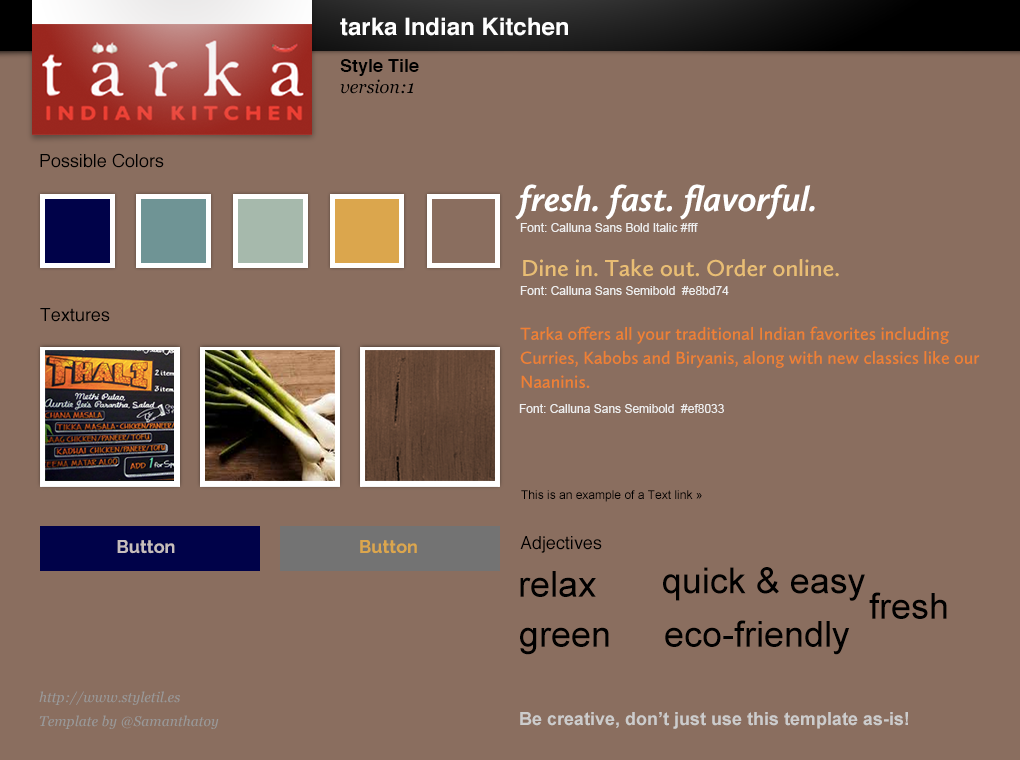
<style>
.page{position:relative;width:1020px;height:760px;background:#8a6e5f}
.page>*{position:absolute;margin:0}
.t1{font:24px "Helvetica-Bold";color:#ffffff}
.t2{font:18px "Helvetica-Bold";color:#000000}
.t3{font:18px "Georgia-Italic";color:#000000}
.t4{font:18px "Helvetica";color:#000000}
.t5{font:36px "CallunaSans-BoldItalic";color:#ffffff}
.t6{font:12px "ArialMT";color:#eeeeee}
.t7{font:24px "CallunaSans-Semibold";color:#e8bd74}
.t8{font:18px/24px "CallunaSans-Semibold";color:#ef8034}
.t9{font:12px "ArialMT";color:#000000}
.t10{font:18px "Raleway-Bold";color:#c6bdbd}
.t11{font:18px "Raleway-Bold";color:#dba64d}
.t12{font:36px "ArialMT";color:#000000}
.t13{font:14px/24px "Georgia-Italic";color:#999999}
.t14{font:18px "Arial-BoldMT";color:#cccccc}
</style>
<div class="page">
<p class="t1" style="left:340px;top:17px;width:228px;height:19px">tarka Indian Kitchen</p>
<p class="t2" style="left:340px;top:59px;width:79px;height:17px">Style Tile</p>
<p class="t3" style="left:340px;top:79px;width:74px;height:15px">version:1</p>
<p class="t4" style="left:40px;top:153px;width:124px;height:15px">Possible Colors</p>
<p class="t5" style="left:515px;top:184px;width:300px;height:36px">fresh. fast. flavorful.</p>
<p class="t6" style="left:520px;top:223px;width:178px;height:9px">Font: Calluna Sans Bold Italic #fff</p>
<p class="t7" style="left:523px;top:258px;width:316px;height:19px">Dine in. Take out. Order online.</p>
<p class="t6" style="left:520px;top:286px;width:209px;height:9px">Font: Calluna Sans Semibold  #e8bd74</p>
<p class="t4" style="left:40px;top:308px;width:70px;height:14px">Textures</p>
<p class="t8" style="left:520px;top:326px;width:460px;height:62px">Tarka offers all your traditional Indian favorites including Curries, Kabobs and Biryanis, along with new classics like our Naaninis.</p>
<p class="t6" style="left:519px;top:404px;width:205px;height:9px">Font: Calluna Sans Semibold  #ef8033</p>
<p class="t9" style="left:521px;top:490px;width:181px;height:12px">This is an example of a Text link »</p>
<p class="t10" style="left:117px;top:540px;width:58px;height:14px">Button</p>
<p class="t11" style="left:360px;top:540px;width:57px;height:14px">Button</p>
<p class="t4" style="left:520px;top:536px;width:82px;height:17px">Adjectives</p>
<p class="t12" style="left:663px;top:567px;width:202px;height:34px">quick &amp; easy</p>
<p class="t12" style="left:520px;top:571px;width:76px;height:26px">relax</p>
<p class="t12" style="left:869px;top:592px;width:78px;height:27px">fresh</p>
<p class="t12" style="left:520px;top:627px;width:89px;height:28px">green</p>
<p class="t12" style="left:665px;top:620px;width:185px;height:35px">eco-friendly</p>
<p class="t13" style="left:39px;top:691px;width:180px;height:38px">http://www.styletil.es<br>Template by @Samanthatoy</p>
<p class="t14" style="left:520px;top:712px;width:388px;height:17px">Be creative, don’t just use this template as-is!</p>
</div>
